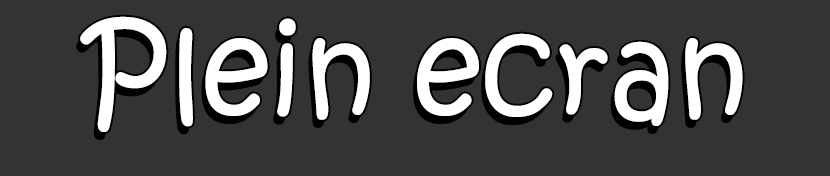
<style>
.page{position:relative;width:830px;height:176px;background:#333333}
.page>*{position:absolute;margin:0}
.t1{font:124.4px "KristenITC-Regular";color:#ffffff}
</style>
<div class="page">
<p class="t1" style="left:80px;top:16px;width:663px;height:116px">Plein ecran</p>
</div>
